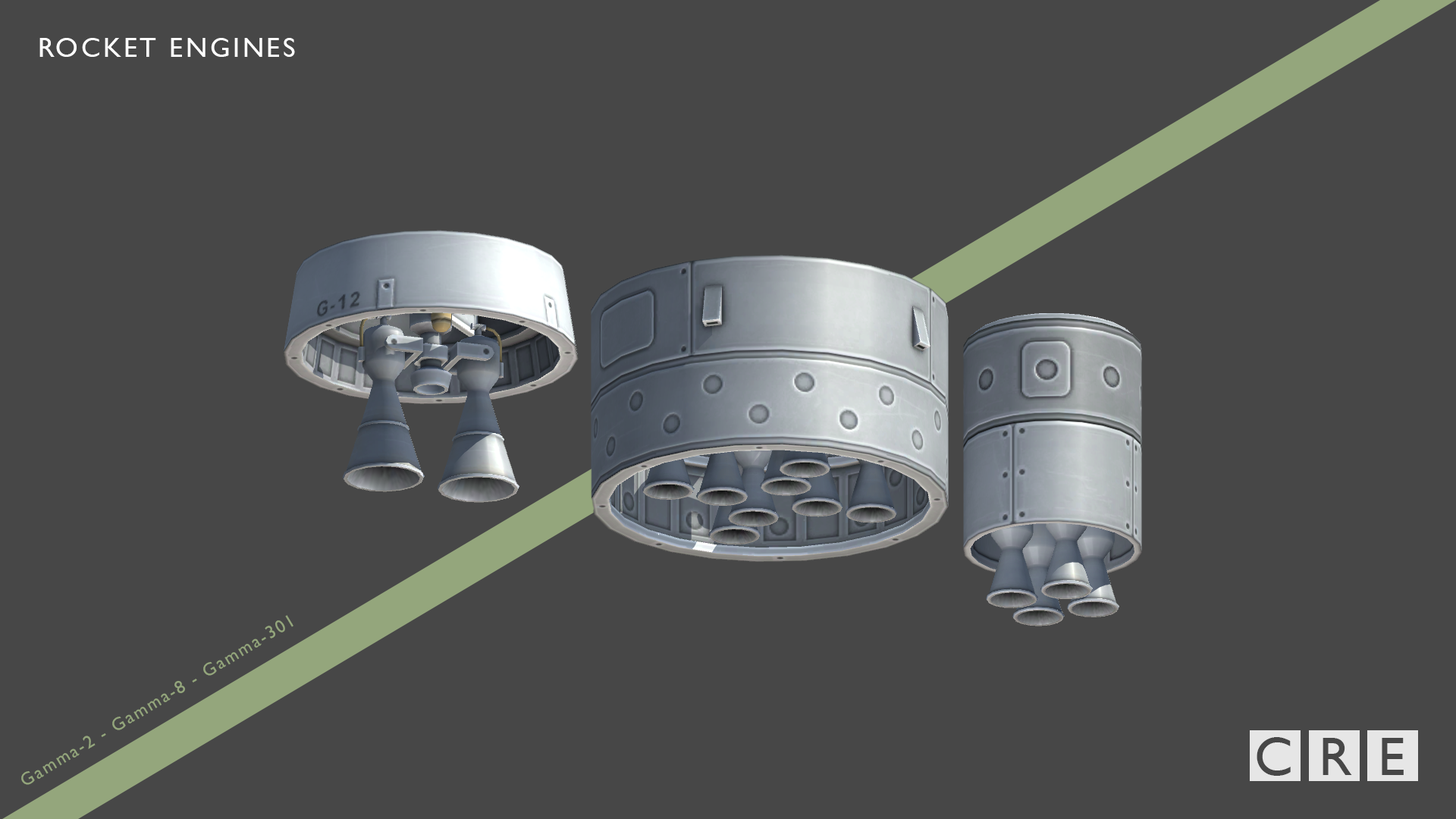
<style>
.page{position:relative;width:1456px;height:819px;background:#474747}
.page>*{position:absolute;margin:0}
.t1{font:27.3px "GillSansMT";letter-spacing:0.1em;color:#ffffff}
.t2{font:54.6px "GillSansMT";letter-spacing:0.1em;color:#474747}
</style>
<div class="page">
<p class="t1" style="left:39px;top:38px;width:256px;height:19px">ROCKET ENGINES</p>
<p class="t2" style="left:1257px;top:737px;width:147px;height:39px">C R E</p>
</div>
